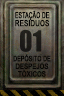
<style>
.page{position:relative;width:64px;height:96px}
.page>*{position:absolute;margin:0}
.t1{font:8.3px/8px "ArialMT";color:#080705;text-transform:uppercase;font-weight:bold;scale:0.6 1}
.t2{font:8.3px/8px "ArialMT";color:#080705;text-transform:uppercase;font-weight:bold;scale:0.73 1}
.t3{font:7.4px "ArialMT";letter-spacing:0.01em;color:#080705;font-weight:bold;scale:0.79 1}
.t4{font:7.4px "ArialMT";letter-spacing:0.01em;color:#080705;font-weight:bold;scale:0.71 1}
</style>
<div class="page">
<p class="t1" style="left:15px;top:10px;width:35px;height:17px">estação de<br><span class="t2">RESIDUOS</span></p>
<p class="t3" style="left:13px;top:54px;width:38px;height:23px;text-align:center"><span class="t4">DEPÓSITO DE<br></span>DESPEJOS<br>TÒXICOS</p>
</div>
